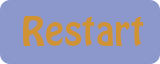
<style>
.page{position:relative;width:160px;height:64px;background:#8c97cb}
.page>*{position:absolute;margin:0}
.t1{font:36px "HoboStd";color:#cf9336}
</style>
<div class="page">
<p class="t1" style="left:23px;top:16px;width:121px;height:30px">Restart</p>
</div>
